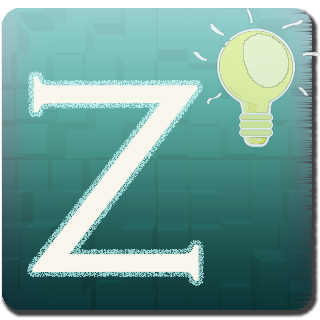
<style>
.page{position:relative;width:320px;height:320px}
.page>*{position:absolute;margin:0}
.t1{font:280px "CopperplateGothic-Light";color:#f8f6ed}
</style>
<div class="page">
<p class="t1" style="left:32px;top:76px;width:167px;height:205px">Z</p>
</div>
